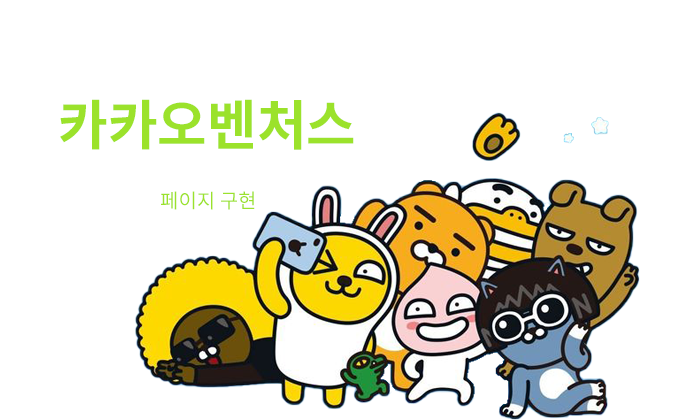
<style>
.page{position:relative;width:700px;height:420px;background:#ffffff}
.page>*{position:absolute;margin:0}
.t1{font:54px "NotoSansKR-Bold";color:#9be22b}
.t2{font:20px "NotoSansKR-Regular";color:#9be22b}
</style>
<div class="page">
<p class="t1" style="left:60px;top:99px;width:294px;height:51px">카카오벤처스</p>
<p class="t2" style="left:161px;top:191px;width:94px;height:19px">페이지 구현</p>
</div>
